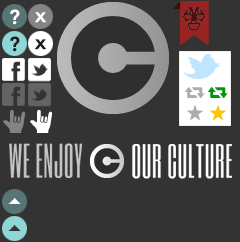
<style>
.page{position:relative;width:240px;height:242px;background:#333333}
.page>*{position:absolute;margin:0}
.t1{font:19.9px "AvenirNext-DemiBold";letter-spacing:0.01em;color:#ffffff}
.t2{font:19.9px "AvenirNext-DemiBold";letter-spacing:0.01em;color:#1e1e1e}
.t3{font:40px "SixCaps";letter-spacing:0.01em;color:#c6c6c6}
.t4{font:40px "SixCaps";letter-spacing:0.01em;color:#ffffff}
</style>
<div class="page">
<p class="t1" style="left:10px;top:9px;width:10px;height:16px">?</p>
<p class="t1" style="left:34px;top:12px;width:13px;height:11px">x</p>
<p class="t2" style="left:10px;top:36px;width:10px;height:16px">?</p>
<p class="t2" style="left:34px;top:39px;width:13px;height:11px">x</p>
<p class="t3" style="left:9px;top:143px;width:73px;height:35px">WE ENJOY</p>
<p class="t4" style="left:132px;top:144px;width:100px;height:35px">OUR CULTURE</p>
</div>
